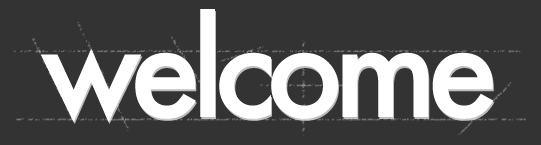
<style>
.page{position:relative;width:541px;height:145px;background:#333333}
.page>*{position:absolute;margin:0}
.t1{font:130.7px "Futura-Medium";letter-spacing:-0.08em;color:#ffffff}
</style>
<div class="page">
<p class="t1" style="left:41px;top:9px;width:453px;height:113px">welcome</p>
</div>
